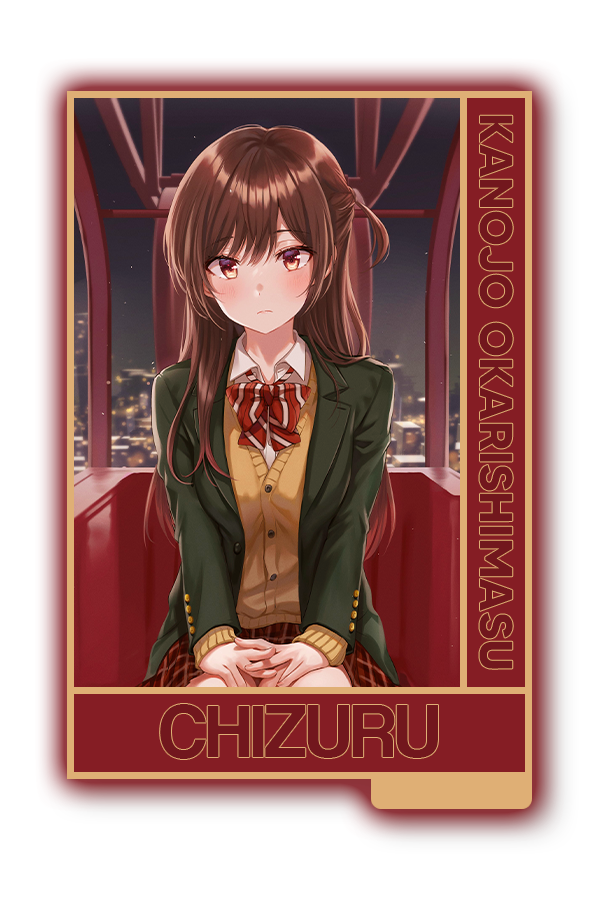
<style>
.page{position:relative;width:600px;height:900px;background:#ffffff}
.page>*{position:absolute;margin:0}
.t1{font:45.9px "MADETOMMY-Bold";color:#62222c}
.t2{font:76.6px "CoolveticaRg-Regular";color:#62222c}
</style>
<div class="page">
<p class="t1" style="left:479px;top:115px;width:34px;height:554px;rotate:90deg">KANOJO OKARISHIMASU</p>
<p class="t2" style="left:160px;top:704px;width:278px;height:55px">CHIZURU</p>
</div>
